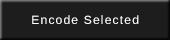
<style>
.page{position:relative;width:170px;height:40px;background:#1d1d1d}
.page>*{position:absolute;margin:0}
.t1{font:12px "LiberationSans";letter-spacing:0.1em;color:#ffffff}
</style>
<div class="page">
<p class="t1" style="left:32px;top:15px;width:107px;height:9px">Encode Selected</p>
</div>
